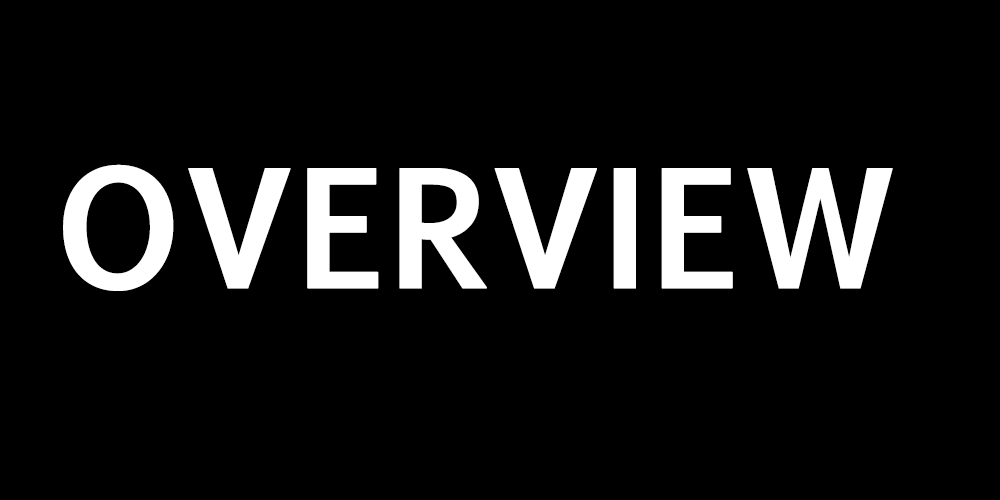
<style>
.page{position:relative;width:1000px;height:500px;background:#000000}
.page>*{position:absolute;margin:0}
.t1{font:156px "EuphemiaUCAS-Bold";color:#ffffff;font-weight:bold}
</style>
<div class="page">
<p class="t1" style="left:63px;top:164px;width:830px;height:127px">OVERVIEW</p>
</div>
